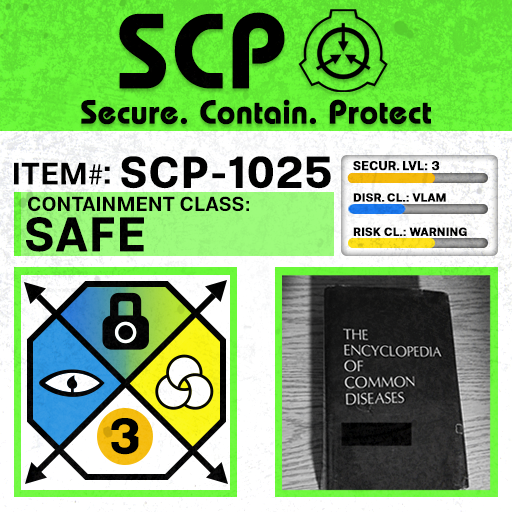
<style>
.page{position:relative;width:512px;height:512px}
.page>*{position:absolute;margin:0}
.t1{font:105.8px "BauhausLT-Demi";color:#000000;font-weight:bold}
.t2{font:33px "BauhausLT-Demi";color:#000000;font-weight:bold}
.t3{font:43.6px "Molde-Semibold";color:#000000;font-weight:bold}
.t4{font:12.5px "Molde-Semibold";color:#000000;font-weight:bold}
.t5{font:31.1px "Molde-Semibold";color:#000000}
.t6{font:31.1px "MyriadPro-Regular";color:#000000}
.t7{font:34.5px "Molde-Semibold";color:#000000}
.t8{font:20.3px "Molde-Semibold";color:#000000}
.t9{font:11.7px "Molde-Semibold";color:#000000;font-weight:bold}
.t10{font:47.8px "Molde-Semibold";color:#000000;font-weight:bold}
</style>
<div class="page">
<p class="t1" style="left:119px;top:12px;width:166px;height:77px">SCP</p>
<p class="t2" style="left:81px;top:99px;width:350px;height:26px">Secure. Contain. Protect</p>
<p class="t3" style="left:121px;top:156px;width:210px;height:33px">SCP-1025</p>
<p class="t4" style="left:353px;top:161px;width:87px;height:10px">SECUR. LVL: 3</p>
<p class="t5" style="left:14px;top:162px;width:89px;height:23px">ITEM<span class="t6">#</span></p>
<p class="t7" style="left:104px;top:166px;width:6px;height:18px">:</p>
<p class="t8" style="left:28px;top:196px;width:221px;height:16px">CONTAINMENT CLASS:</p>
<p class="t9" style="left:353px;top:193px;width:93px;height:9px">DISR. CL.: VLAM</p>
<p class="t10" style="left:26px;top:217px;width:118px;height:35px">SAFE</p>
<p class="t9" style="left:353px;top:227px;width:114px;height:9px">RISK CL.: WARNING</p>
</div>
